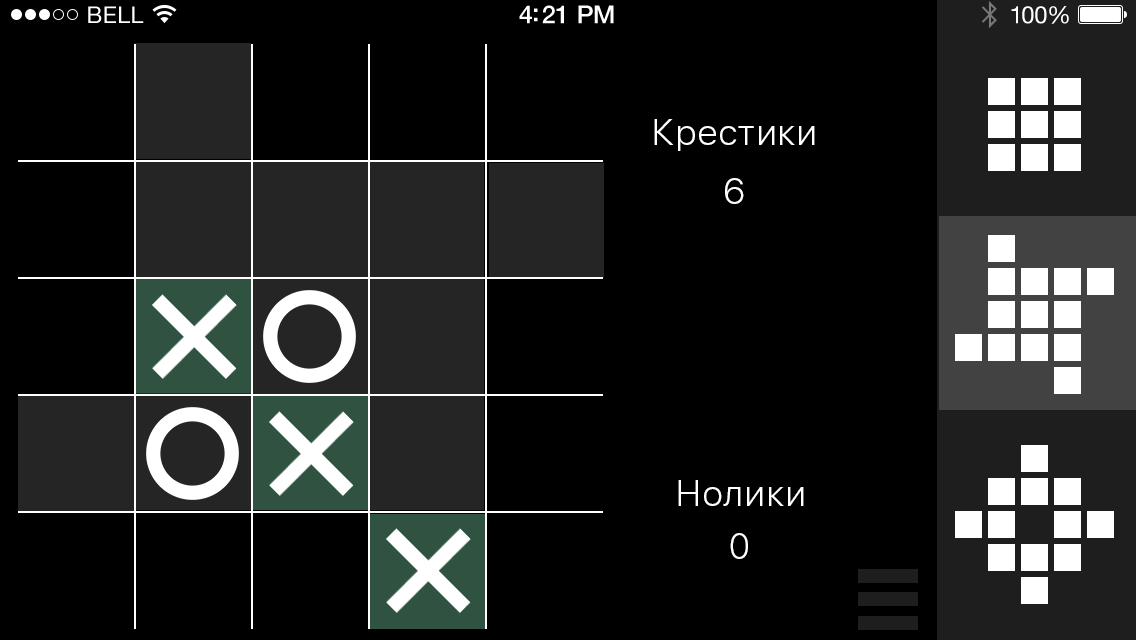
<style>
.page{position:relative;width:1136px;height:640px;background:#000000}
.page>*{position:absolute;margin:0}
.t1{font:23px "HelveticaNeue";letter-spacing:0.02em;color:#ffffff}
.t2{font:25px "HelveticaNeue-Medium";letter-spacing:-0.02em;color:#ffffff}
.t3{font:24px "HelveticaNeue";letter-spacing:-0.02em;color:#ffffff}
.t4{font:36px "SFUIText-Light";color:#ffffff}
</style>
<div class="page">
<p class="t1" style="left:88px;top:6px;width:56px;height:17px">BELL</p>
<p class="t2" style="left:519px;top:5px;width:95px;height:19px">4:21 PM</p>
<p class="t3" style="left:1011px;top:6px;width:58px;height:18px">100%</p>
<p class="t4" style="left:654px;top:119px;width:161px;height:32px">Крестики</p>
<p class="t4" style="left:725px;top:178px;width:19px;height:26px">6</p>
<p class="t4" style="left:678px;top:480px;width:126px;height:26px">Нолики</p>
<p class="t4" style="left:730px;top:533px;width:18px;height:26px">0</p>
</div>
